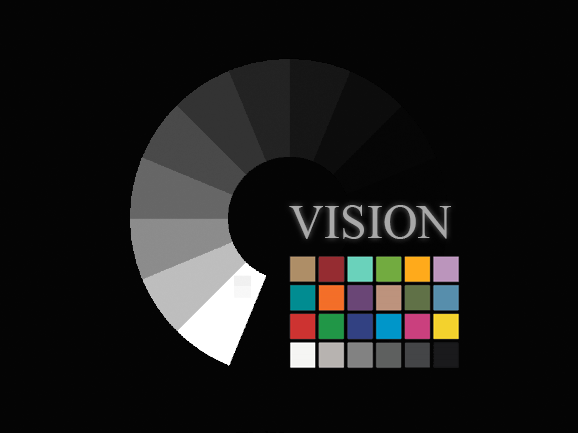
<style>
.page{position:relative;width:578px;height:433px;background:#040404}
.page>*{position:absolute;margin:0}
.t1{font:48px "TimesNewRomanPSMT";color:#a9a9a9}
</style>
<div class="page">
<p class="t1" style="left:289px;top:205px;width:162px;height:34px">VISION</p>
</div>
